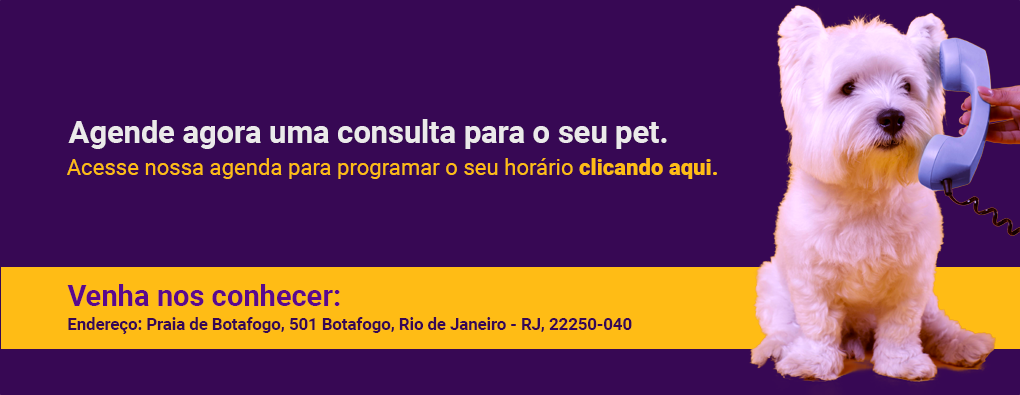
<style>
.page{position:relative;width:1020px;height:395px;background:#370854}
.page>*{position:absolute;margin:0}
.t1{font:30.8px "Roboto-Bold";color:#ebeaea}
.t2{font:22.2px "Roboto-Regular";color:#ffbc15}
.t3{font:22.2px "Roboto-Black";color:#ffbc15}
.t4{font:29.1px "Roboto-Bold";color:#5b098d}
.t5{font:16.7px "Roboto-Bold";color:#370854}
</style>
<div class="page">
<p class="t1" style="left:68px;top:119px;width:599px;height:30px">Agende agora uma consulta para o seu pet.</p>
<p class="t2" style="left:67px;top:158px;width:650px;height:21px">Acesse nossa agenda para programar o seu horário <span class="t3">clicando aqui.</span></p>
<p class="t4" style="left:67px;top:284px;width:273px;height:22px">Venha nos conhecer:</p>
<p class="t5" style="left:68px;top:317px;width:564px;height:17px">Endereço: Praia de Botafogo, 501 Botafogo, Rio de Janeiro - RJ, 22250-040</p>
</div>
